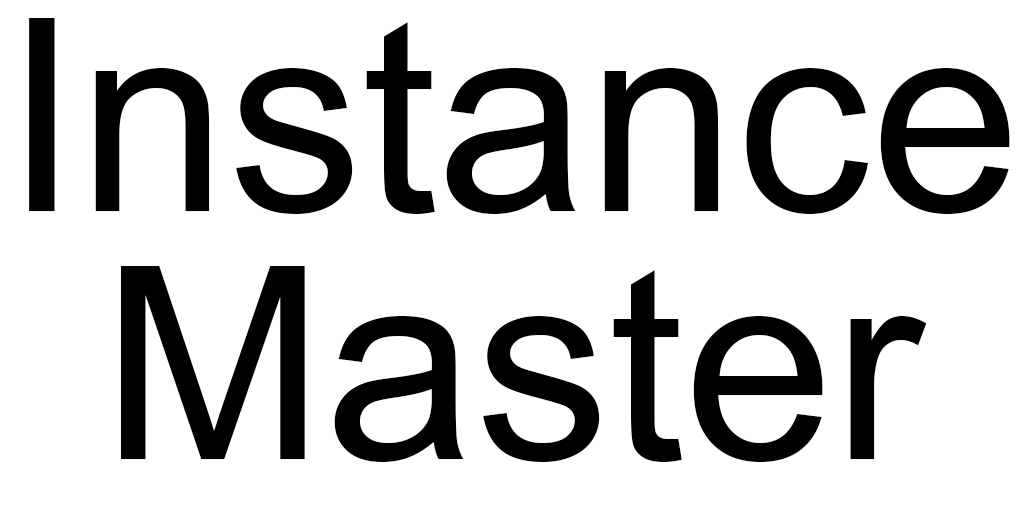
<style>
.page{position:relative;width:1024px;height:512px;background:#ffffff}
.page>*{position:absolute;margin:0}
.t1{font:269px/248px "ArialMT";color:#000000}
</style>
<div class="page">
<p class="t1" style="left:29px;top:18px;width:981px;height:444px;text-align:center">Instance<br>Master</p>
</div>
